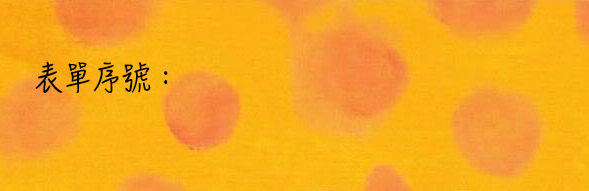
<style>
.page{position:relative;width:589px;height:191px}
.page>*{position:absolute;margin:0}
.t1{font:30px "HanziPenTC-W3";letter-spacing:-0.05em;color:#000000;font-variant:small-caps;font-weight:bold}
</style>
<div class="page">
<p class="t1" style="left:35px;top:61px;width:133px;height:33px">表單序號：</p>
</div>
